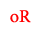
<style>
.page{position:relative;width:40px;height:30px;background:#ffffff}
.page>*{position:absolute;margin:0}
.t1{font:18px "MinionPro-Regular";color:#ff0000}
</style>
<div class="page">
<p class="t1" style="left:10px;top:10px;width:21px;height:13px">oR</p>
</div>
